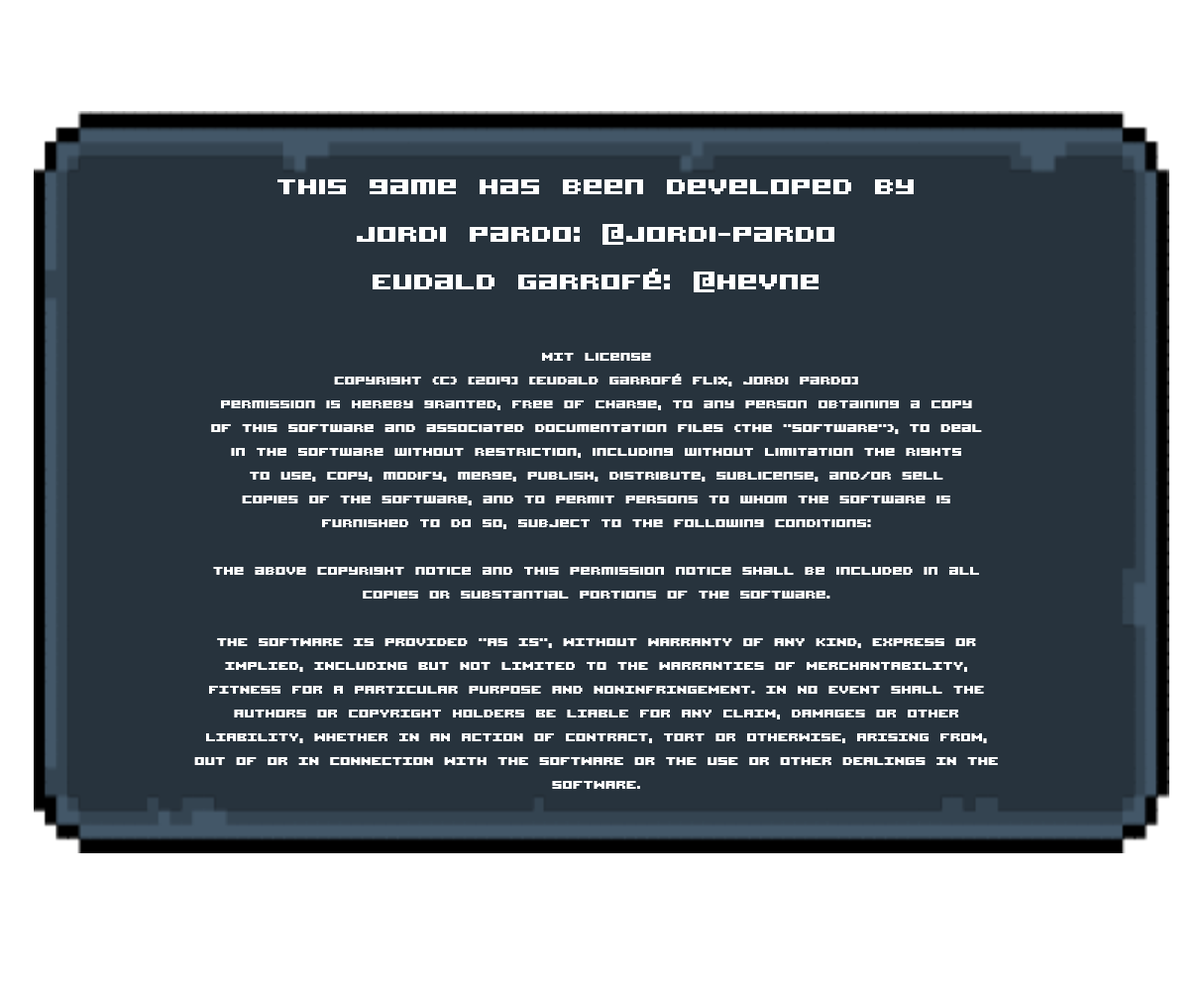
<style>
.page{position:relative;width:1203px;height:991px;background:#27333d}
.page>*{position:absolute;margin:0}
.t1{font:19.8px "AcknowledgeTT-BRK-";color:#ffffff}
.t2{font:39.6px "AcknowledgeTT-BRK-";color:#ffffff}
</style>
<div class="page">
<p class="t1" style="left:194px;top:179px;width:804px;height:610px;text-align:center"><span class="t2">This game has been developed by<br>Jordi pardo: @Jordi-pardo<br>Eudald Garrofé: @Hevne<br><br></span>MIT License<br>Copyright (c) [2019] [Eudald Garrofé Flix, Jordi Pardo]<br>Permission is hereby granted, free of charge, to any person obtaining a copy<br>of this software and associated documentation files (the "Software"), to deal<br>in the Software without restriction, including without limitation the rights<br>to use, copy, modify, merge, publish, distribute, sublicense, and/or sell<br>copies of the Software, and to permit persons to whom the Software is<br>furnished to do so, subject to the following conditions:<br><br>The above copyright notice and this permission notice shall be included in all<br>copies or substantial portions of the Software.<br><br>THE SOFTWARE IS PROVIDED "AS IS", WITHOUT WARRANTY OF ANY KIND, EXPRESS OR<br>IMPLIED, INCLUDING BUT NOT LIMITED TO THE WARRANTIES OF MERCHANTABILITY,<br>FITNESS FOR A PARTICULAR PURPOSE AND NONINFRINGEMENT. IN NO EVENT SHALL THE<br>AUTHORS OR COPYRIGHT HOLDERS BE LIABLE FOR ANY CLAIM, DAMAGES OR OTHER<br>LIABILITY, WHETHER IN AN ACTION OF CONTRACT, TORT OR OTHERWISE, ARISING FROM,<br>OUT OF OR IN CONNECTION WITH THE SOFTWARE OR THE USE OR OTHER DEALINGS IN THE<br>SOFTWARE.</p>
</div>
